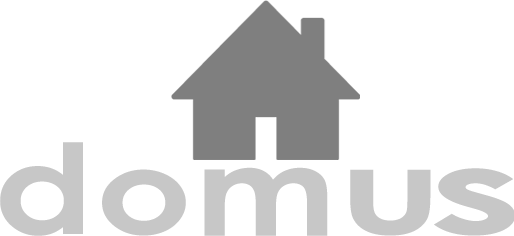
<style>
.page{position:relative;width:514px;height:236px;background:#ffffff}
.page>*{position:absolute;margin:0}
.t1{font:124.3px "CenturyGothic-Bold";letter-spacing:0.02em;color:#c7c7c7;scale:1.21 1}
.t2{font:118.1px "CenturyGothic-Bold";letter-spacing:0.02em;color:#c7c7c7;scale:1.27 1}
.t3{font:120.6px "CenturyGothic-Bold";letter-spacing:-0.075em;color:#c7c7c7;scale:1.42 1}
.t4{font:120.6px "CenturyGothic-Bold";letter-spacing:-0.05em;color:#c7c7c7;scale:1.78 1}
</style>
<div class="page">
<p class="t1" style="left:0px;top:142px;width:515px;height:94px">d<span class="t2">o</span>m<span class="t3">u</span><span class="t4">s</span></p>
</div>
